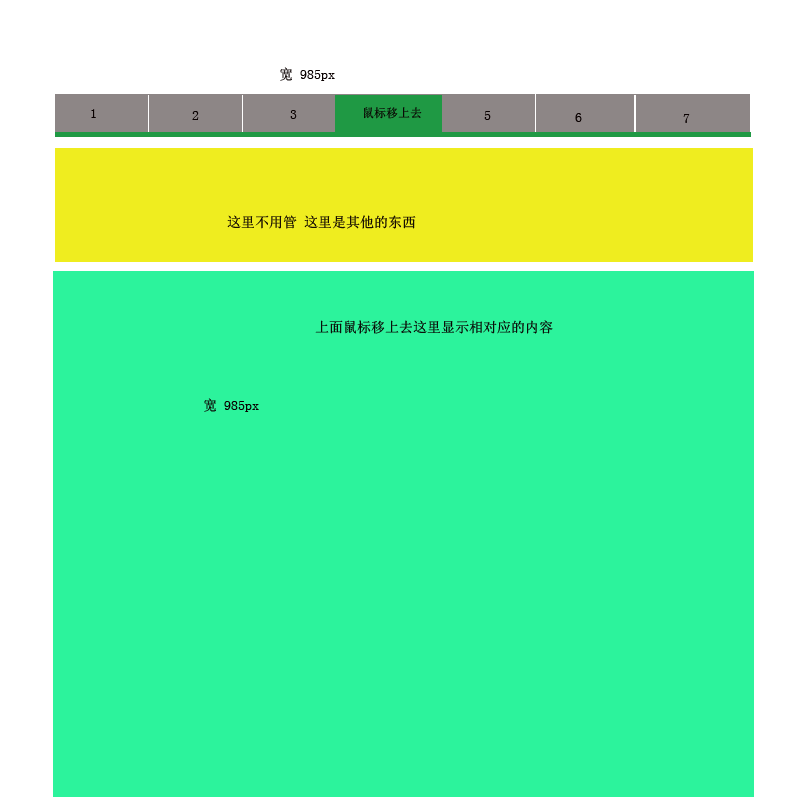
<style>
.page{position:relative;width:800px;height:800px;background:#2cf39c}
.page>*{position:absolute;margin:0}
.t1{font:14px "SimSun";color:#090000}
.t2{font:12px "SimSun";color:#090000}
</style>
<div class="page">
<p class="t1" style="left:280px;top:67px;width:55px;height:14px">宽 985px</p>
<p class="t1" style="left:91px;top:109px;width:5px;height:9px">1</p>
<p class="t1" style="left:192px;top:111px;width:7px;height:9px">2</p>
<p class="t1" style="left:290px;top:110px;width:7px;height:9px">3</p>
<p class="t2" style="left:364px;top:107px;width:58px;height:12px">鼠标移上去</p>
<p class="t1" style="left:484px;top:111px;width:7px;height:9px">5</p>
<p class="t1" style="left:575px;top:113px;width:7px;height:9px">6</p>
<p class="t1" style="left:683px;top:114px;width:7px;height:9px">7</p>
<p class="t1" style="left:227px;top:215px;width:189px;height:14px">这里不用管 这里是其他的东西</p>
<p class="t1" style="left:315px;top:320px;width:238px;height:14px">上面鼠标移上去这里显示相对应的内容</p>
<p class="t1" style="left:204px;top:398px;width:55px;height:14px">宽 985px</p>
</div>
